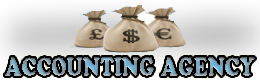
<style>
.page{position:relative;width:260px;height:82px}
.page>*{position:absolute;margin:0}
.t1{font:25.7px "CooperBlackStd";scale:0.75 1}
</style>
<div class="page">
<p class="t1" style="left:5px;top:57px;width:250px;height:19px">ACCOUNTING AGENCY</p>
</div>
